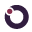
<style>
.page{position:relative;width:32px;height:32px;background:#ffffff}
.page>*{position:absolute;margin:0}
.t1{font:44.4px "Comodo-_Regular";color:#311d3f}
</style>
<div class="page">
<p class="t1" style="left:4px;top:5px;width:25px;height:24px">o</p>
</div>
